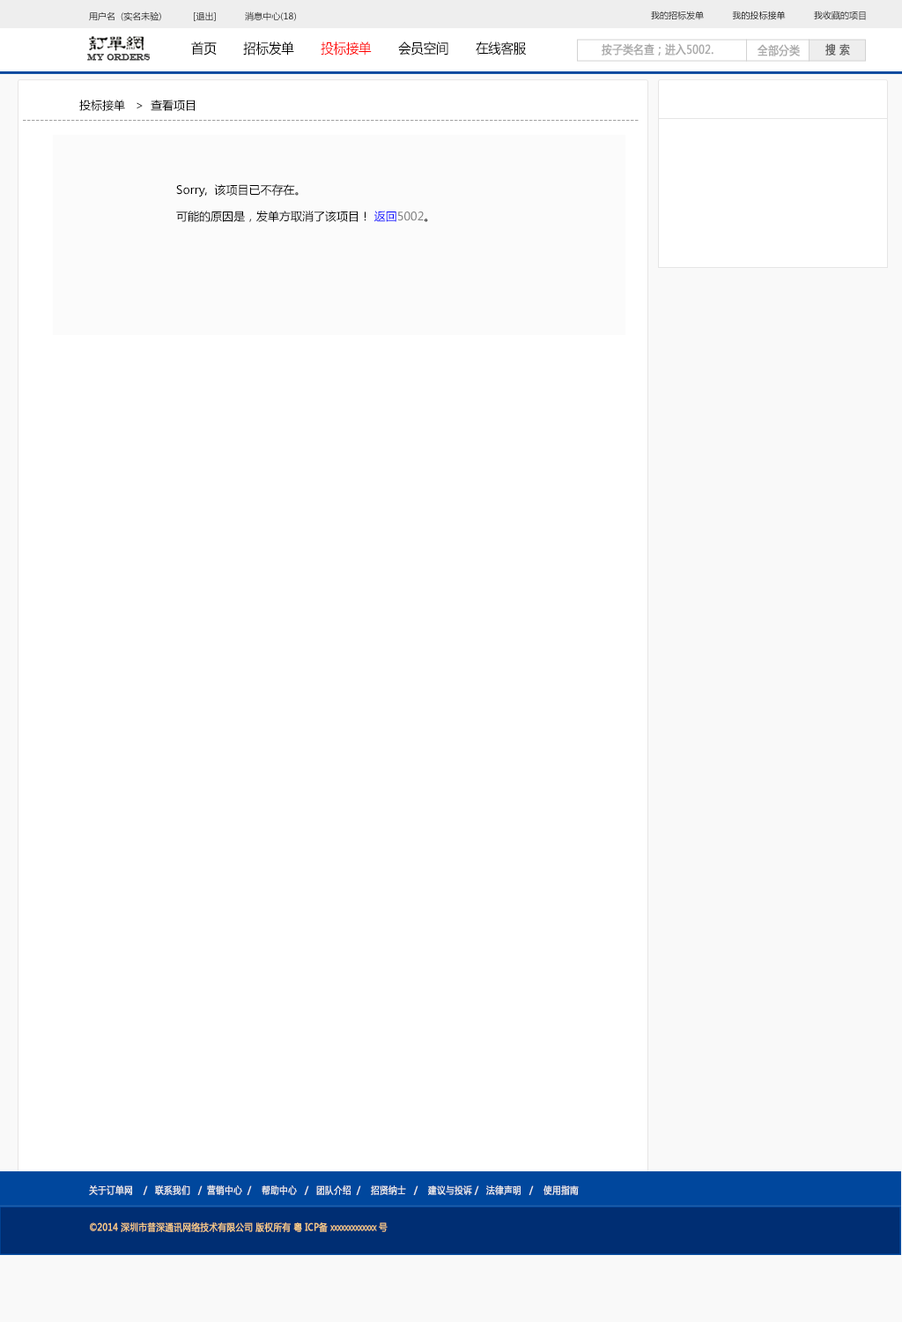
<style>
.page{position:relative;width:902px;height:1322px;background:#ffffff}
.page>*{position:absolute;margin:0}
.t1{font:8.8px "MicrosoftYaHei";color:#000000}
.t2{font:13.6px "MicrosoftYaHei";color:#000000;font-variant:small-caps;scale:0.94 1}
.t3{font:13.6px "MicrosoftYaHei";color:#ff0000;font-variant:small-caps;scale:0.94 1}
.t4{font:8.7px "EngraversMT";color:#434343;font-variant:small-caps;font-weight:bold;scale:0.86 1}
.t5{font:11.6px "MicrosoftYaHei";color:#aaaaaa;font-variant:small-caps;font-weight:bold;scale:0.86 1}
.t6{font:11.6px "MicrosoftYaHei";color:#626262;font-variant:small-caps;font-weight:bold;scale:0.86 1}
.t7{font:11.5px "MicrosoftYaHei";color:#000000}
.t8{font:10.6px "MicrosoftYaHei";color:#a0a0a0}
.t9{font:11.5px/26.4px "MicrosoftYaHei";color:#000000}
.t10{font:11.5px/26.4px "MicrosoftYaHei";color:#0000ff}
.t11{font:11.5px/26.4px "MicrosoftYaHei";color:#7d7d7d}
.t12{font:9.7px "MicrosoftYaHei";color:#eeeeee;font-variant:small-caps;font-weight:bold;scale:0.86 1}
.t13{font:13.6px "STXihei";color:#eeeeee;font-variant:small-caps;font-weight:bold;scale:0.86 1}
.t14{font:9.7px "MicrosoftYaHei";color:#facd89;font-variant:small-caps;font-weight:bold;scale:0.87 1}
.t15{font:9.7px "MicrosoftYaHei";color:#eeeeee;font-variant:small-caps;font-weight:bold;scale:0.87 1}
</style>
<div class="page">
<p class="t1" style="left:89px;top:11px;width:207px;height:10px">用户名  (实名未验)            [退出]           消息中心(18)</p>
<p class="t1" style="left:651px;top:11px;width:215px;height:9px">我的招标发单           我的投标接单           我收藏的项目</p>
<p class="t2" style="left:191px;top:41px;width:336px;height:15px">首页       招标发单       <span class="t3">投标接单</span>       会员空间       在线客服</p>
<p class="t4" style="left:87px;top:54px;width:64px;height:7px">MY ORDERS</p>
<p class="t5" style="left:602px;top:43px;width:112px;height:13px">按子类名查；进入5002.</p>
<p class="t5" style="left:758px;top:44px;width:42px;height:12px">全部分类</p>
<p class="t6" style="left:826px;top:43px;width:24px;height:13px">搜 索</p>
<p class="t7" style="left:79px;top:100px;width:116px;height:11px">投标接单   &gt;  查看项目</p>
<p class="t8" style="left:23px;top:120px;width:616px;height:1px">--------------------------------------------------------------------------------------------------------------------------------------------</p>
<p class="t9" style="left:176px;top:184px;width:252px;height:38px">Sorry,  该项目已不存在。<br>可能的原因是，发单方取消了该项目！ <span class="t10">返回</span><span class="t11">5002</span>。</p>
<p class="t12" style="left:89px;top:1184px;width:490px;height:11px"><span class="t13"><br><br></span>关于订单网    /   联系我们   /  营销中心  /    帮助中心   /   团队介绍  /    招贤纳士   /    建议与投诉 /   法律声明   /    使用指南</p>
<p class="t14" style="left:90px;top:1222px;width:298px;height:10px"><span class="t15"> </span>©2014 深圳市普深通讯网络技术有限公司 版权所有 粤 ICP备 xxxxxxxxxxxxx 号</p>
</div>
